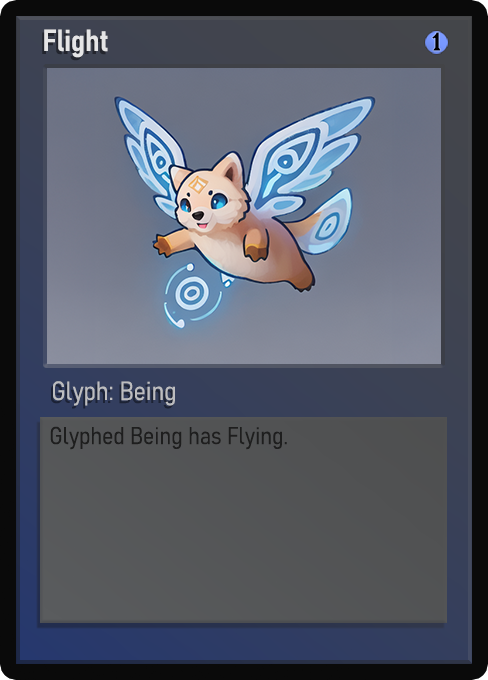
<style>
.page{position:relative;width:488px;height:680px}
.page>*{position:absolute;margin:0}
.t1{font:30px "Bahnschrift-SemiBoldSemiCondensed";color:#f2f2f2;font-weight:bold}
.t2{font:25px "WTRRoycroft";color:#000000;font-weight:bold;scale:1.09 1}
.t3{font:26px "Bahnschrift-LightSemiCondensed";color:#c8c8c8;font-weight:bold}
.t4{font:24px "Bahnschrift-LightSemiCondensed";color:#1e1e1e;font-weight:bold}
</style>
<div class="page">
<p class="t1" style="left:44px;top:29px;width:64px;height:29px;opacity:0.9">Flight</p>
<p class="t2" style="left:432px;top:32px;width:9px;height:19px">1</p>
<p class="t3" style="left:53px;top:381px;width:122px;height:25px;opacity:0.9">Glyph: Being</p>
<p class="t4" style="left:50px;top:426px;width:237px;height:24px">Glyphed Being has Flying.</p>
</div>
